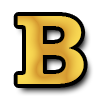
<style>
.page{position:relative;width:100px;height:100px;background:#ffffff}
.page>*{position:absolute;margin:0}
.t1{font:100px "BookmanOldStyle-Bold"}
</style>
<div class="page">
<p class="t1" style="left:17px;top:16px;width:67px;height:68px">B</p>
</div>
